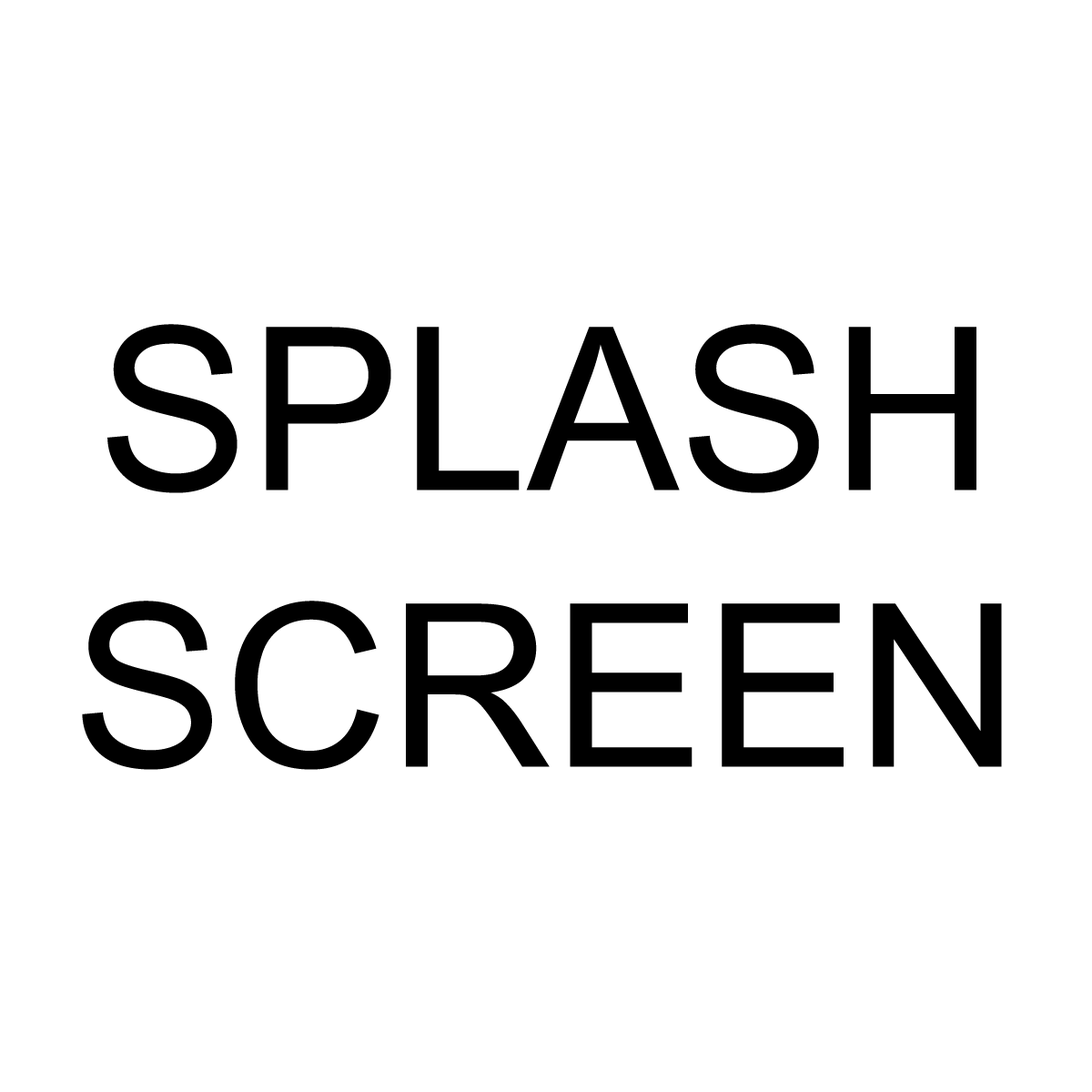
<style>
.page{position:relative;width:1092px;height:1092px;background:#ffffff}
.page>*{position:absolute;margin:0}
.t1{font:227.5px/276.6px "ArialMT";color:#000000}
</style>
<div class="page">
<p class="t1" style="left:82px;top:324px;width:920px;height:446px;text-align:center">SPLASH<br>SCREEN</p>
</div>
